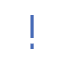
<style>
.page{position:relative;width:64px;height:64px;background:#ffffff}
.page>*{position:absolute;margin:0}
.t1{font:48px "Raleway-Regular";color:#456ab7}
</style>
<div class="page">
<p class="t1" style="left:30px;top:15px;width:4px;height:34px">!</p>
</div>
